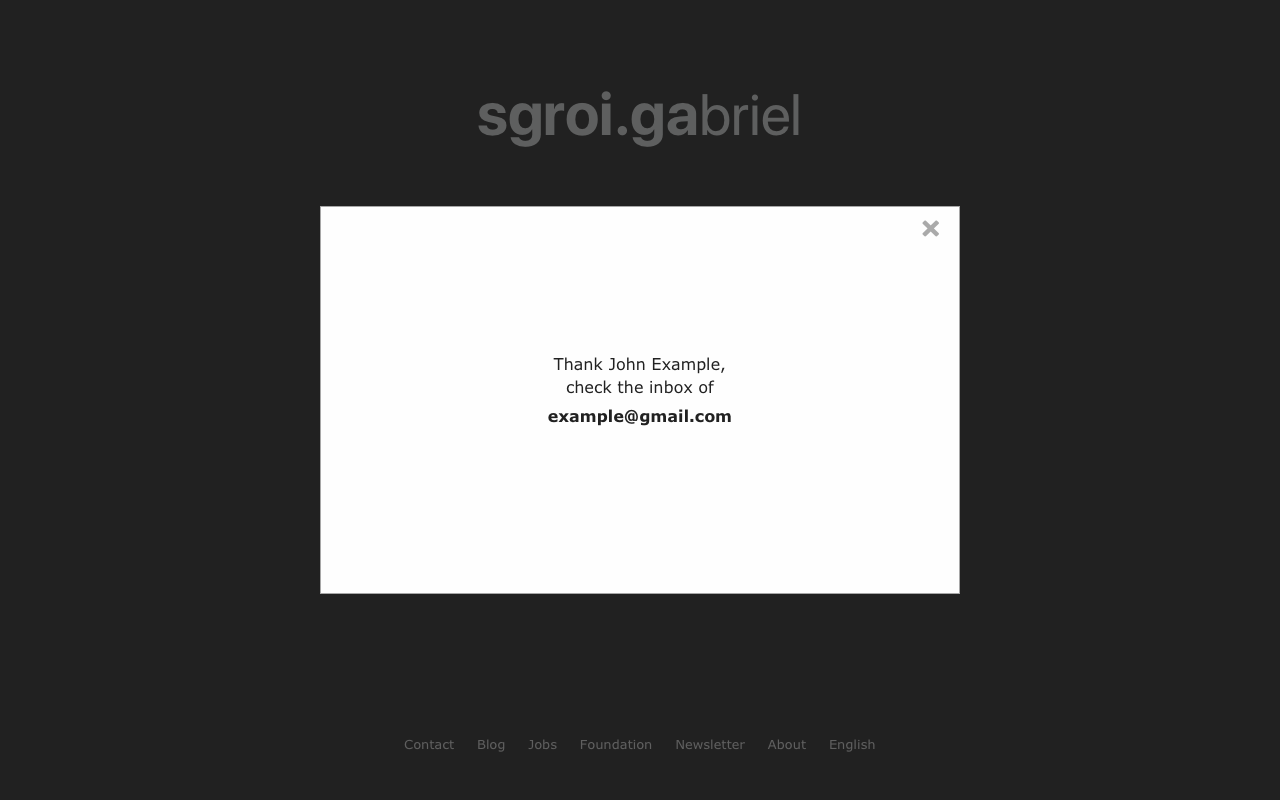
<style>
.page{position:relative;width:1280px;height:800px;background:#212121}
.page>*{position:absolute;margin:0}
.t1{font:60px "SFProDisplay-Bold";color:#5e5f5f}
.t2{font:58px "SFProDisplay-Regular";color:#5e5f5f}
.t3{font:16px/22.5px "Verdana";color:#212121}
.t4{font:16px/28.2px "Verdana";color:#212121}
.t5{font:16px/28.2px "Verdana-Bold";color:#212121}
.t6{font:13px "Verdana";color:#5f5f5f}
</style>
<div class="page">
<p class="t1" style="left:478px;top:91px;width:321px;height:56px">sgroi.ga<span class="t2">briel</span></p>
<p class="t3" style="left:548px;top:357px;width:183px;height:69px;text-align:center">Thank John Example,<br><span class="t4">check the inbox of<br></span><span class="t5">example@gmail.com</span></p>
<p class="t6" style="left:404px;top:739px;width:471px;height:13px">Contact     Blog     Jobs     Foundation     Newsletter     About     English</p>
</div>
